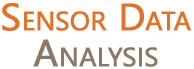
<style>
.page{position:relative;width:194px;height:69px;background:#ffffff}
.page>*{position:absolute;margin:0}
.t1{font:38px/36px "LeelawadeeUI";color:#e47128;font-variant:small-caps;font-weight:bold}
.t2{font:38px/36px "LeelawadeeUI";color:#000000;font-variant:small-caps;font-weight:bold}
.t3{font:38px/36px "LeelawadeeUI";color:#8c7965;font-variant:small-caps;font-weight:bold}
</style>
<div class="page">
<p class="t1" style="left:2px;top:3px;width:189px;height:64px;text-align:center">Sensor Data<span class="t2"><br></span><span class="t3">Analysis</span></p>
</div>
